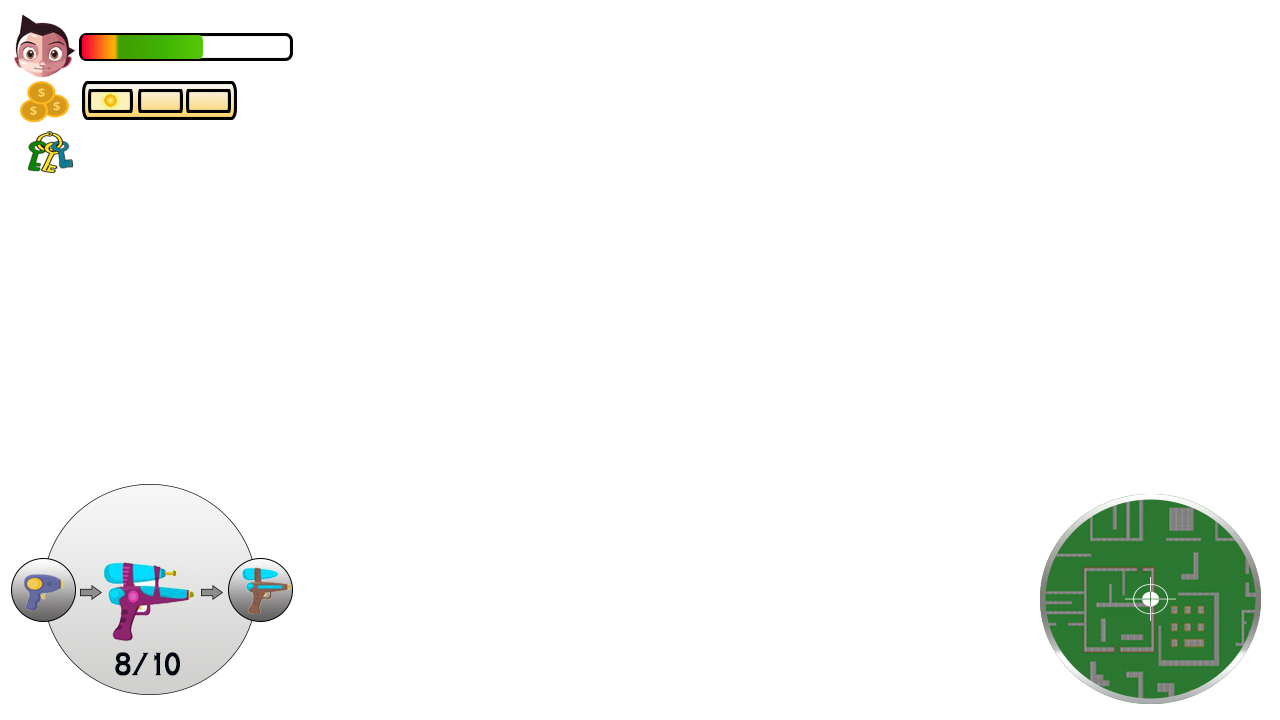
<style>
.page{position:relative;width:1280px;height:720px;background:#ffffff}
.page>*{position:absolute;margin:0}
.t1{font:33.4px "CopperplateGothic-Bold";color:#01070e;scale:0.7 1}
</style>
<div class="page">
<p class="t1" style="left:115px;top:652px;width:65px;height:24px">8/10</p>
</div>
